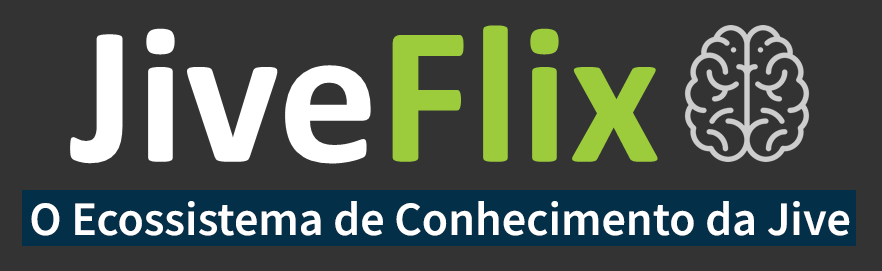
<style>
.page{position:relative;width:882px;height:271px;background:#333333}
.page>*{position:absolute;margin:0}
.t1{font:48px "SourceSansRoman-Semibold";color:#ffffff}
</style>
<div class="page">
<p class="t1" style="left:31px;top:201px;width:819px;height:35px">O Ecossistema de Conhecimento da Jive</p>
</div>
